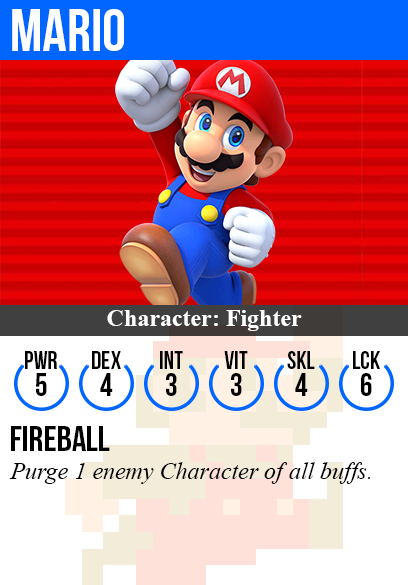
<style>
.page{position:relative;width:408px;height:585px;background:#ffffff}
.page>*{position:absolute;margin:0}
.t1{font:60px "BebasNeue";color:#ffffff}
.t2{font:24px "TimesNewRomanPS-BoldMT";color:#ffffff}
.t3{font:25px "BebasNeue";color:#000000}
.t4{font:32px "BebasNeue";color:#000000}
.t5{font:36px "BebasNeue";color:#000000}
.t6{font:24px "TimesNewRomanPS-ItalicMT";color:#000000}
</style>
<div class="page">
<p class="t1" style="left:12px;top:9px;width:112px;height:42px">mario</p>
<p class="t2" style="left:107px;top:310px;width:195px;height:21px">Character: Fighter</p>
<p class="t3" style="left:25px;top:351px;width:32px;height:18px">PWR</p>
<p class="t3" style="left:92px;top:351px;width:29px;height:18px">dex</p>
<p class="t3" style="left:160px;top:351px;width:23px;height:18px">int</p>
<p class="t3" style="left:224px;top:351px;width:24px;height:18px">vit</p>
<p class="t3" style="left:287px;top:351px;width:28px;height:18px">skl</p>
<p class="t3" style="left:353px;top:351px;width:27px;height:18px">lck</p>
<p class="t4" style="left:36px;top:373px;width:11px;height:23px">5</p>
<p class="t4" style="left:100px;top:373px;width:13px;height:23px">4</p>
<p class="t4" style="left:166px;top:373px;width:11px;height:23px">3</p>
<p class="t4" style="left:231px;top:373px;width:11px;height:23px">3</p>
<p class="t4" style="left:295px;top:373px;width:13px;height:23px">4</p>
<p class="t4" style="left:361px;top:373px;width:11px;height:23px">6</p>
<p class="t5" style="left:11px;top:426px;width:99px;height:25px">fireball</p>
<p class="t6" style="left:9px;top:462px;width:362px;height:22px">Purge 1 enemy Character of all buffs.</p>
</div>
